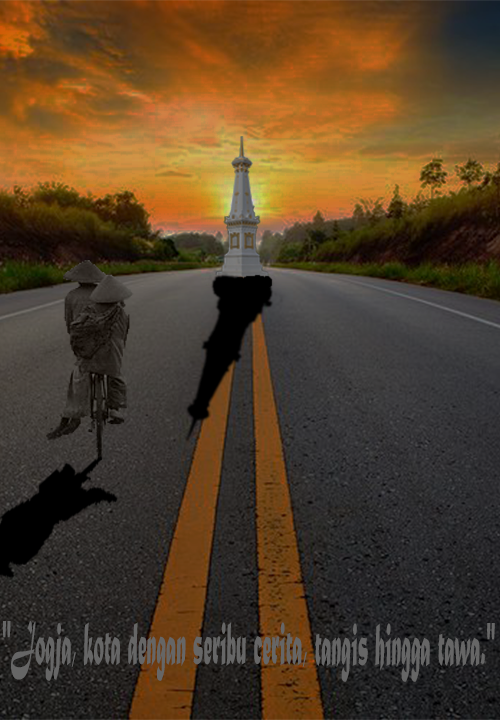
<style>
.page{position:relative;width:500px;height:720px}
.page>*{position:absolute;margin:0}
.t1{font:63.9px "MaturaMTScriptCapitals";color:#666666;scale:0.32 1}
</style>
<div class="page">
<p class="t1" style="left:2px;top:620px;width:493px;height:62px">"Jogja, kota dengan seribu cerita, tangis hingga tawa."</p>
</div>
